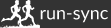
<style>
.page{position:relative;width:111px;height:28px;background:#333333}
.page>*{position:absolute;margin:0}
.t1{font:18px "Lato-Regular";color:#ffffff}
</style>
<div class="page">
<p class="t1" style="left:40px;top:10px;width:68px;height:13px">run-sync</p>
</div>
